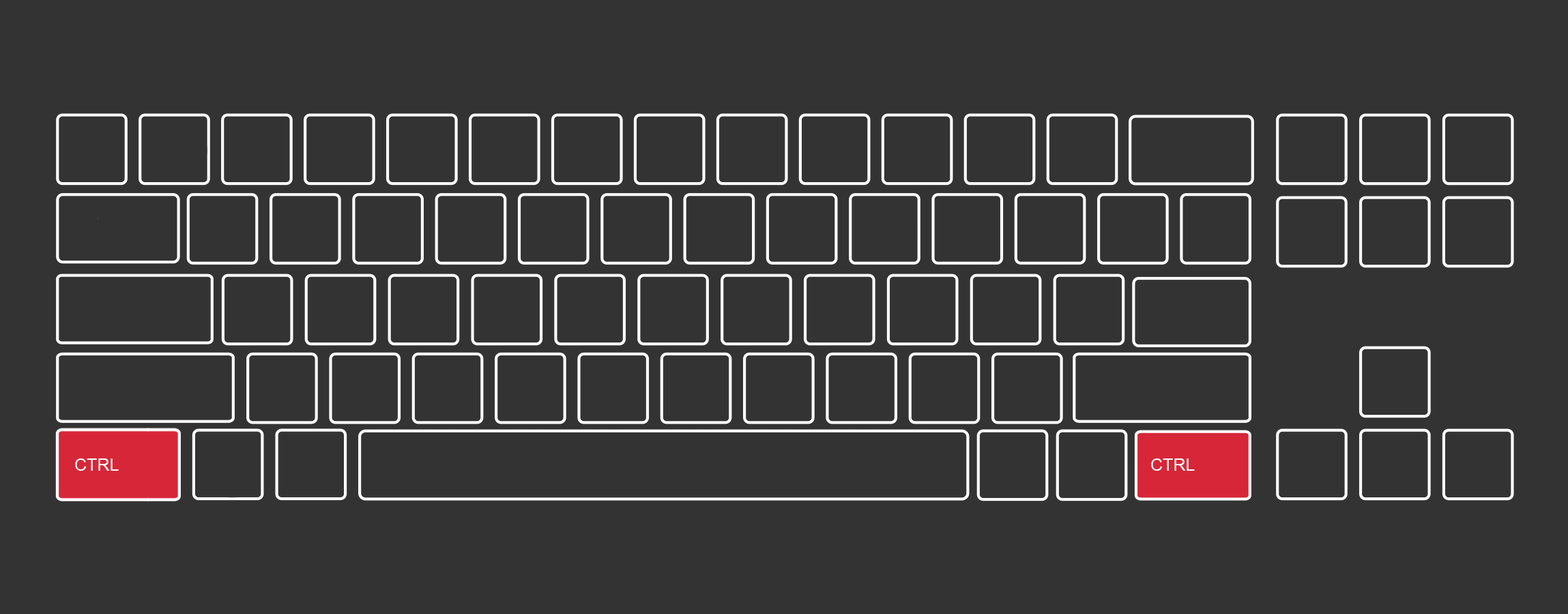
<style>
.page{position:relative;width:1568px;height:614px;background:#333333}
.page>*{position:absolute;margin:0}
.t1{font:17.1px "ArialMT";color:#ffffff}
</style>
<div class="page">
<p class="t1" style="left:75px;top:459px;width:44px;height:12px">CTRL</p>
<p class="t1" style="left:1151px;top:459px;width:44px;height:12px">CTRL</p>
</div>
